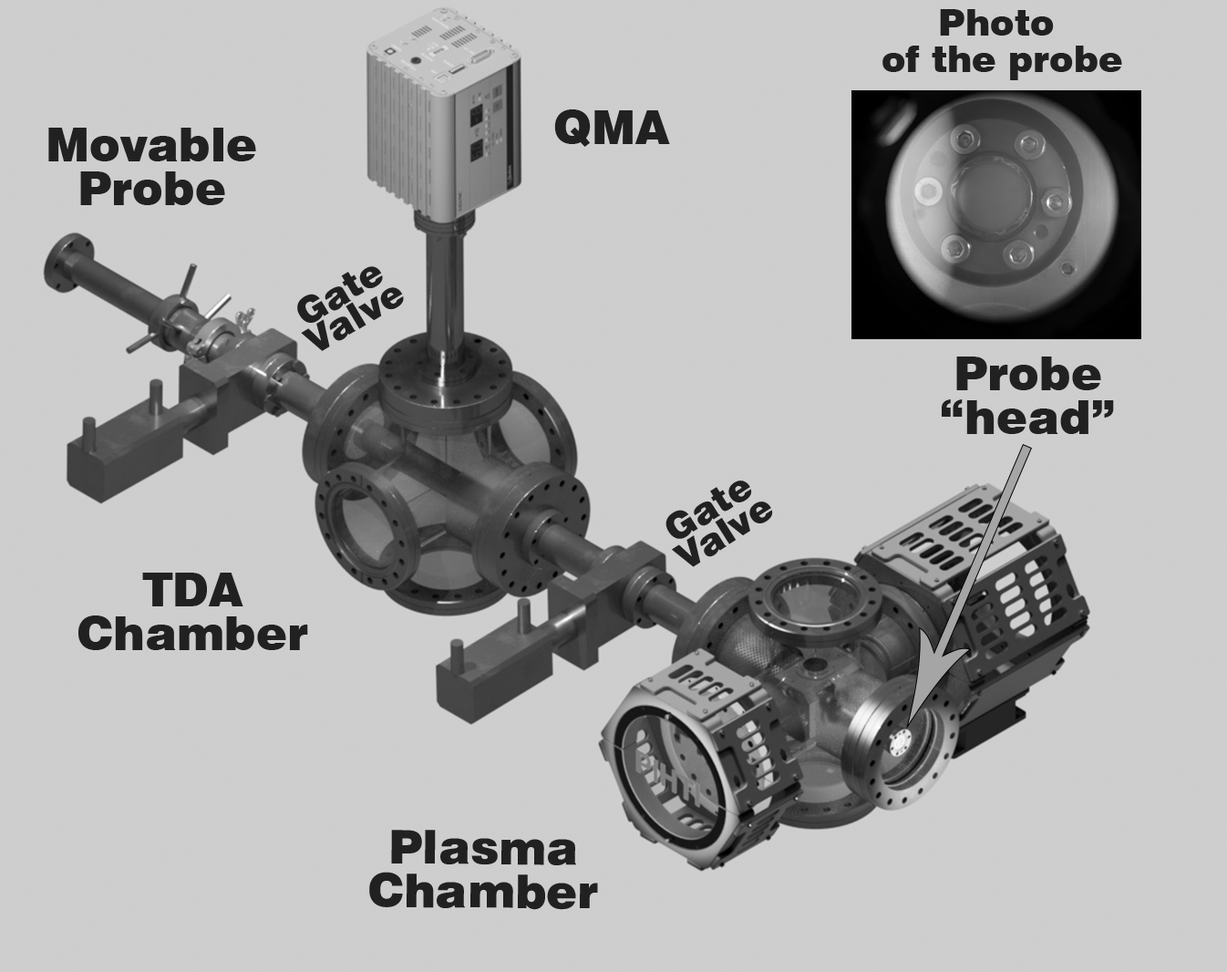
<style>
.page{position:relative;width:1227px;height:972px;background:#cecece}
.page>*{position:absolute;margin:0}
.t1{font:36.5px/36.5px "Swiss721BT-Black";color:#212121}
.t2{font:46.5px "Swiss721BT-Black";color:#212121}
.t3{font:46.5px/43.8px "Swiss721BT-Black";color:#212121}
.t4{font:36.5px/29.2px "Swiss721BT-Black";color:#212121}
</style>
<div class="page">
<p class="t1" style="left:882px;top:9px;width:240px;height:71px;text-align:center">Photo <br>of the probe</p>
<p class="t2" style="left:554px;top:109px;width:116px;height:38px">QMA</p>
<p class="t3" style="left:48px;top:128px;width:208px;height:77px;text-align:center">Movable<br>Probe</p>
<p class="t4" style="left:297px;top:266px;width:107px;height:85px;text-align:center;rotate:-31deg">Gate<br>Valve</p>
<p class="t3" style="left:942px;top:356px;width:172px;height:78px;text-align:center">Probe<br>“head”</p>
<p class="t4" style="left:665px;top:480px;width:108px;height:87px;text-align:center;rotate:-32deg">Gate<br>Valve</p>
<p class="t3" style="left:78px;top:572px;width:230px;height:78px;text-align:center">TDA<br>Chamber</p>
<p class="t3" style="left:369px;top:830px;width:229px;height:80px;text-align:center">Plasma<br>Chamber</p>
</div>
